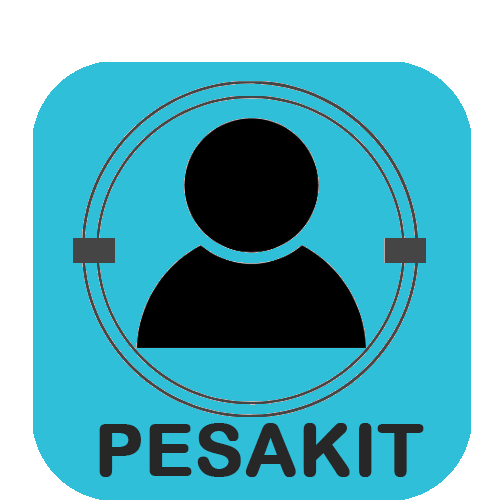
<style>
.page{position:relative;width:500px;height:500px;background:#30bfd9}
.page>*{position:absolute;margin:0}
.t1{font:72px "ArialRoundedMTBold";color:#282727;font-weight:bold}
</style>
<div class="page">
<p class="t1" style="left:99px;top:423px;width:325px;height:54px">PESAKIT</p>
</div>
